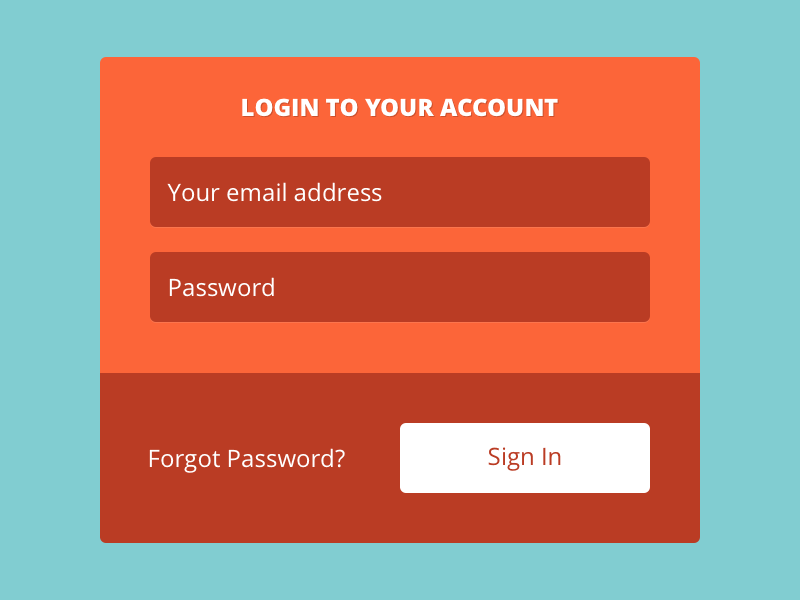
<style>
.page{position:relative;width:800px;height:600px;background:#81cdd1}
.page>*{position:absolute;margin:0}
.t1{font:24px "OpenSans-Extrabold";color:#ffffff;text-transform:uppercase}
.t2{font:24px "OpenSans";color:#ffffff}
.t3{font:24px "OpenSans";color:#ba3c24}
</style>
<div class="page">
<p class="t1" style="left:242px;top:98px;width:316px;height:19px">LOGIN TO YOUR ACCOUNT</p>
<p class="t2" style="left:167px;top:182px;width:215px;height:20px">Your email address</p>
<p class="t2" style="left:169px;top:277px;width:105px;height:20px">Password</p>
<p class="t2" style="left:149px;top:448px;width:196px;height:25px">Forgot Password?</p>
<p class="t3" style="left:488px;top:447px;width:73px;height:24px">Sign In</p>
</div>
